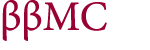
<style>
.page{position:relative;width:150px;height:50px;background:#ffffff}
.page>*{position:absolute;margin:0}
.t1{font:42px "MinionPro-Regular";color:#990033}
</style>
<div class="page">
<p class="t1" style="left:2px;top:0px;width:105px;height:41px">ββMC</p>
</div>
